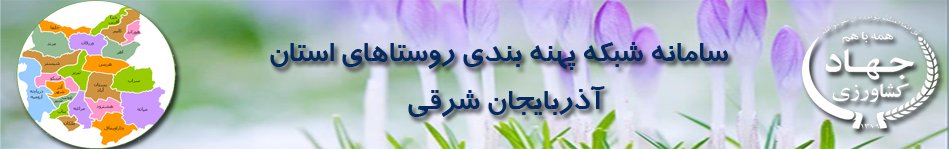
<style>
.page{position:relative;width:949px;height:149px}
.page>*{position:absolute;margin:0}
.t1{font:30px "BTrafficBold";color:#062a5f}
</style>
<div class="page">
<p class="t1" style="left:270px;top:42px;width:458px;height:75px;text-align:center">سامانه شبکه پهنه بندي روستاهاي استان   <br><br>آذربايجان شرقي</p>
</div>
